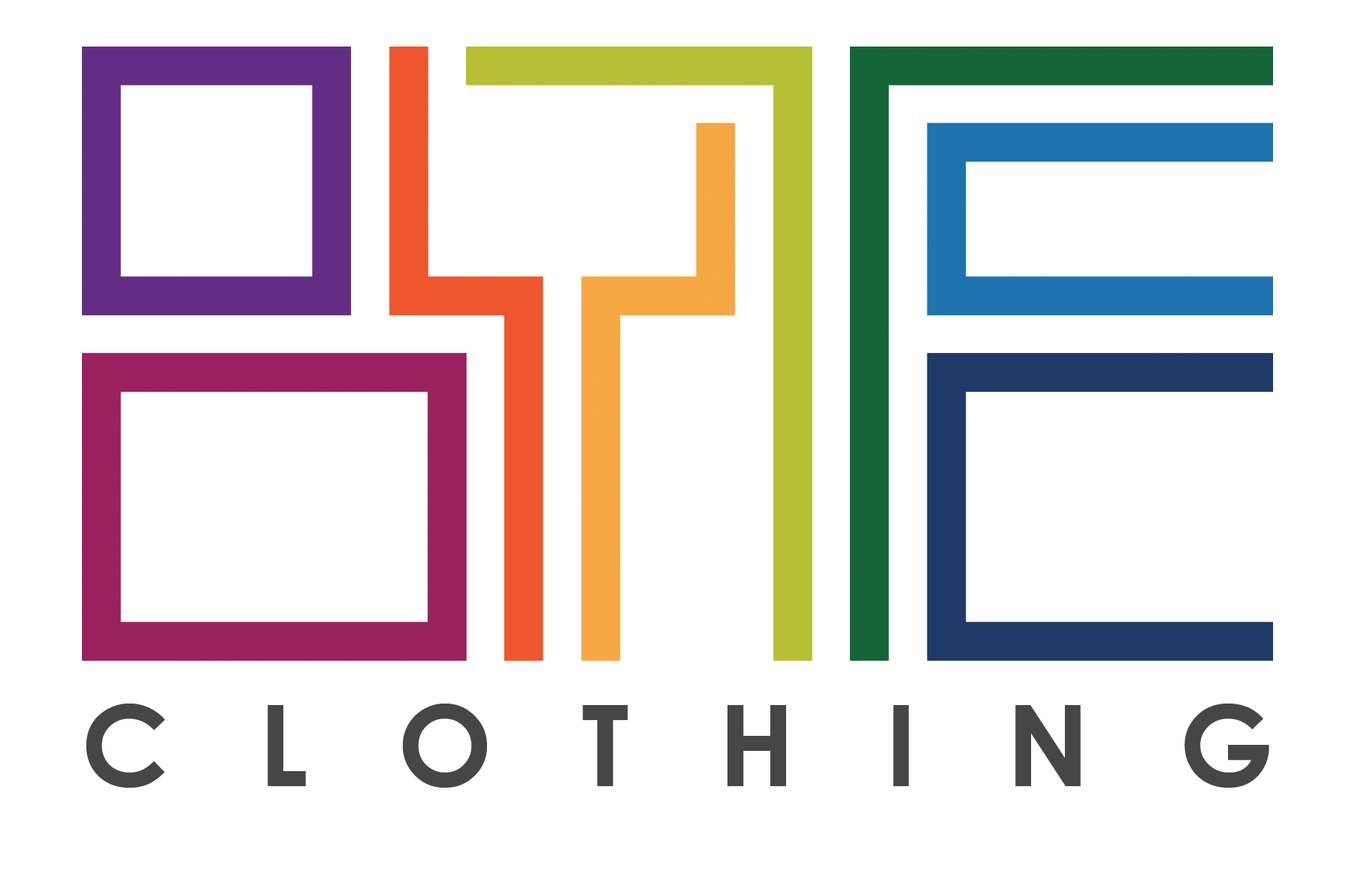
<style>
.page{position:relative;width:1364px;height:874px;background:#ffffff}
.page>*{position:absolute;margin:0}
.t1{font:112.7px "CenturyGothic-Bold";letter-spacing:0.795em;color:#464646}
</style>
<div class="page">
<p class="t1" style="left:86px;top:704px;width:1183px;height:84px">CLOTHING</p>
</div>
